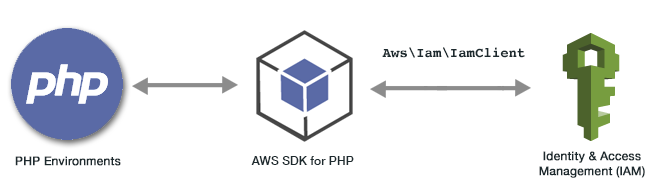
<style>
.page{position:relative;width:650px;height:190px;background:#ffffff}
.page>*{position:absolute;margin:0}
.t1{font:14px "Courier-Bold";color:#1d2a2e}
.t2{font:12px "HelveticaNeue";color:#1d2a2e;font-weight:bold}
.t3{font:12.1px "HelveticaNeue-Medium";color:#1d2a2e}
</style>
<div class="page">
<p class="t1" style="left:382px;top:47px;width:143px;height:11px">Aws\Iam\IamClient</p>
<p class="t2" style="left:15px;top:156px;width:106px;height:10px">PHP Environments</p>
<p class="t3" style="left:251px;top:156px;width:103px;height:9px">AWS SDK for PHP</p>
<p class="t2" style="left:539px;top:151px;width:106px;height:27px;text-align:center">Identity &amp; Access<br>Management (IAM)</p>
</div>
